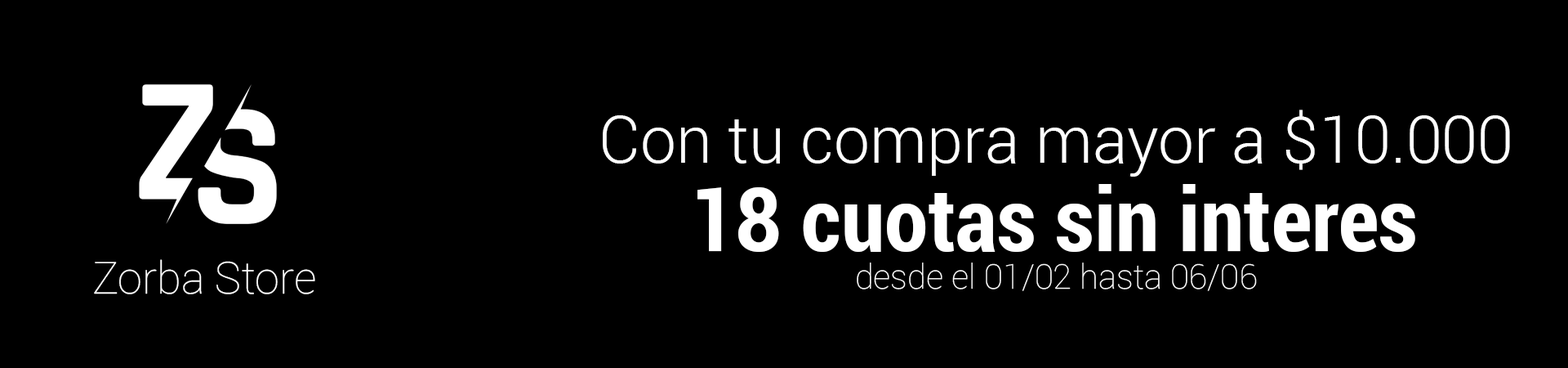
<style>
.page{position:relative;width:1568px;height:368px;background:#000000}
.page>*{position:absolute;margin:0}
.t1{font:64.7px "Roboto-Light";color:#ffffff}
.t2{font:88.5px "Roboto-BoldCondensed";color:#ffffff}
.t3{font:44.2px "Roboto-Thin";color:#ffffff}
.t4{font:34.1px "Roboto-Thin";color:#ffffff}
</style>
<div class="page">
<p class="t1" style="left:603px;top:109px;width:907px;height:67px">Con tu compra mayor a $10.000</p>
<p class="t2" style="left:697px;top:184px;width:718px;height:68px">18 cuotas sin interes</p>
<p class="t3" style="left:94px;top:259px;width:221px;height:35px">Zorba Store</p>
<p class="t4" style="left:857px;top:262px;width:400px;height:29px">desde el 01/02 hasta 06/06</p>
</div>
